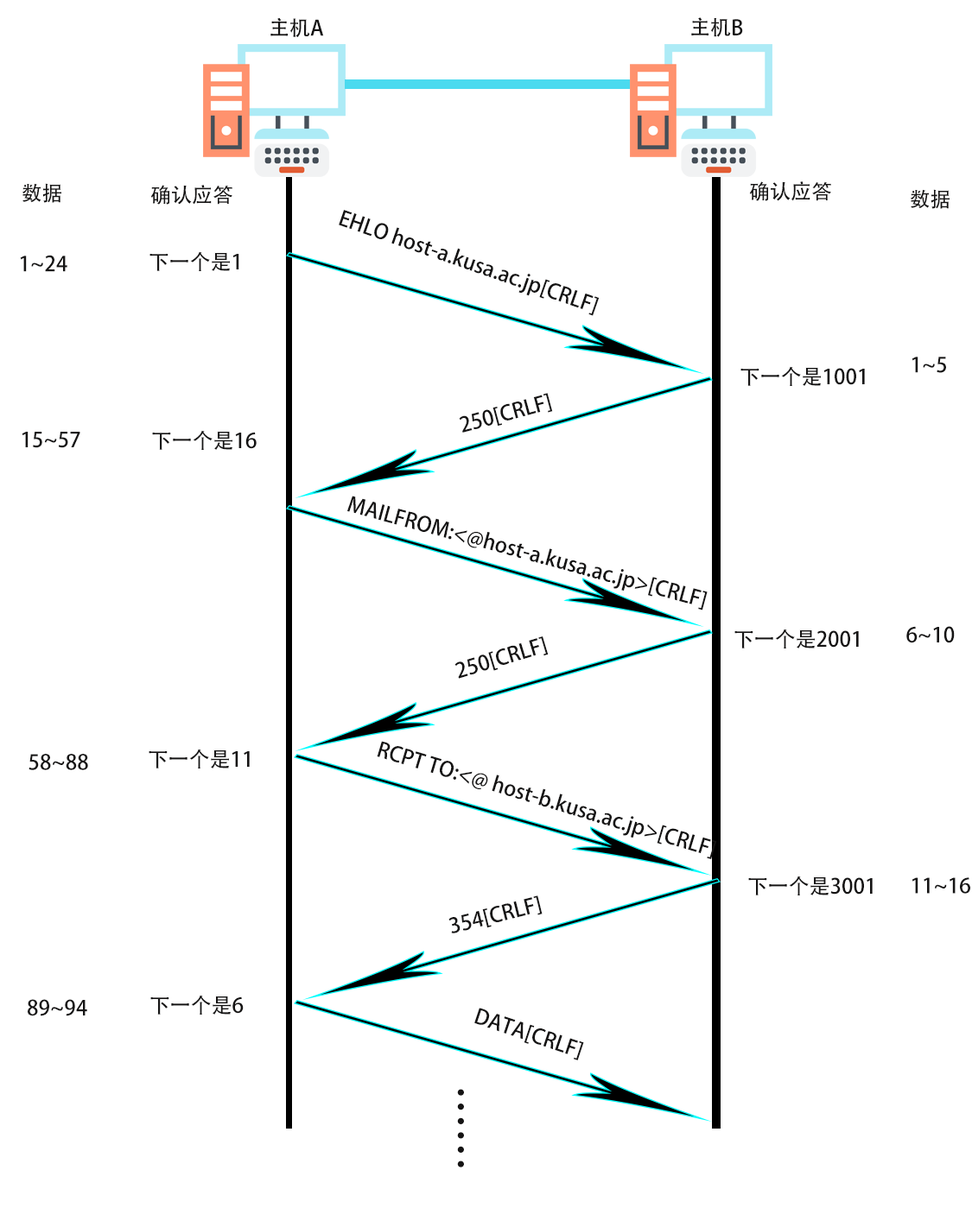
<style>
.page{position:relative;width:972px;height:1227px;background:#ffffff}
.page>*{position:absolute;margin:0}
.t1{font:20.7px "AdobeHeitiStd-Regular";color:#151414}
.t2{font:43px "AdobeHeitiStd-Regular";color:#151414}
</style>
<div class="page">
<p class="t1" style="left:270px;top:17px;width:54px;height:20px">主机A</p>
<p class="t1" style="left:691px;top:17px;width:52px;height:20px">主机B</p>
<p class="t1" style="left:22px;top:183px;width:39px;height:20px">数据</p>
<p class="t1" style="left:150px;top:185px;width:82px;height:20px">确认应答</p>
<p class="t1" style="left:749px;top:181px;width:82px;height:20px">确认应答</p>
<p class="t1" style="left:909px;top:189px;width:40px;height:20px">数据</p>
<p class="t1" style="left:339px;top:210px;width:260px;height:106px;rotate:19deg">EHLO host-a.kusa.ac.jp[CRLF]</p>
<p class="t1" style="left:20px;top:255px;width:47px;height:17px">1~24</p>
<p class="t1" style="left:149px;top:251px;width:90px;height:20px">下一个是1</p>
<p class="t1" style="left:911px;top:357px;width:35px;height:16px">1~5</p>
<p class="t1" style="left:740px;top:366px;width:125px;height:20px">下一个是1001</p>
<p class="t1" style="left:459px;top:393px;width:94px;height:40px;rotate:-15deg">250[CRLF]</p>
<p class="t1" style="left:22px;top:432px;width:58px;height:16px">15~57</p>
<p class="t1" style="left:152px;top:430px;width:105px;height:20px">下一个是16</p>
<p class="t1" style="left:347px;top:496px;width:360px;height:115px;rotate:15deg">MAILFROM:&lt;@host-a.kusa.ac.jp&gt;[CRLF]</p>
<p class="t1" style="left:734px;top:629px;width:124px;height:20px">下一个是2001</p>
<p class="t1" style="left:906px;top:626px;width:48px;height:17px">6~10</p>
<p class="t1" style="left:454px;top:637px;width:94px;height:42px;rotate:-17deg">250[CRLF]</p>
<p class="t1" style="left:149px;top:749px;width:101px;height:20px">下一个是11</p>
<p class="t1" style="left:377px;top:741px;width:340px;height:118px;rotate:17deg">RCPT TO:&lt;@ host-b.kusa.ac.jp&gt;[CRLF]</p>
<p class="t1" style="left:29px;top:754px;width:59px;height:16px">58~88</p>
<p class="t1" style="left:748px;top:876px;width:124px;height:20px">下一个是3001</p>
<p class="t1" style="left:911px;top:877px;width:59px;height:17px">11~16</p>
<p class="t1" style="left:448px;top:896px;width:94px;height:38px;rotate:-14deg">354[CRLF]</p>
<p class="t1" style="left:28px;top:999px;width:59px;height:18px">89~94</p>
<p class="t1" style="left:150px;top:995px;width:94px;height:20px">下一个是6</p>
<p class="t1" style="left:474px;top:1008px;width:110px;height:53px;rotate:18deg">DATA[CRLF]</p>
<p class="t2" style="left:457px;top:1089px;width:7px;height:79px;rotate:90deg">……</p>
</div>
